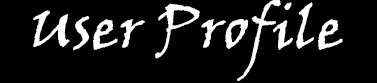
<style>
.page{position:relative;width:377px;height:83px;background:#000000}
.page>*{position:absolute;margin:0}
.t1{font:60px "VinerHandITC";color:#ffffff}
</style>
<div class="page">
<p class="t1" style="left:33px;top:0px;width:310px;height:81px">User Profile</p>
</div>
